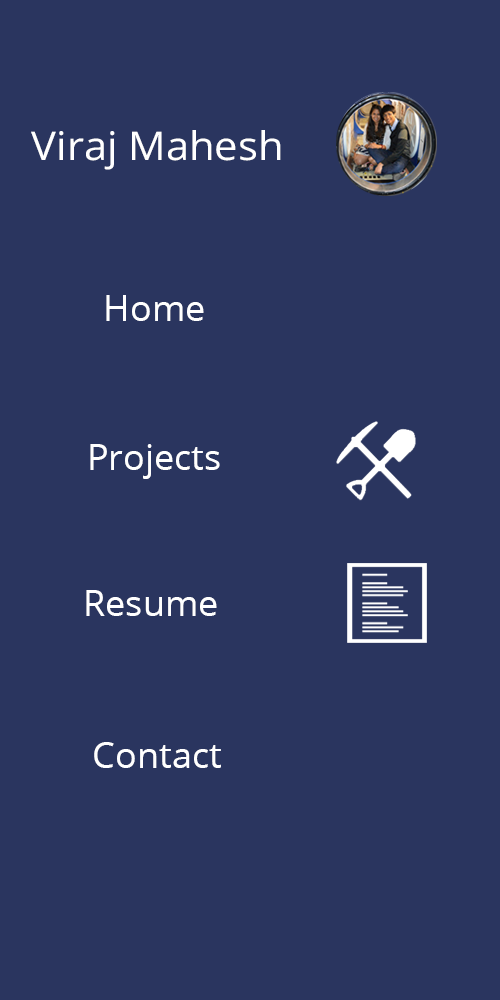
<style>
.page{position:relative;width:500px;height:1000px;background:#2a355f}
.page>*{position:absolute;margin:0}
.t1{font:39.4px "OpenSans";color:#ffffff;scale:1.06 1}
.t2{font:36px "OpenSans";color:#ffffff}
</style>
<div class="page">
<p class="t1" style="left:31px;top:130px;width:250px;height:40px">Viraj Mahesh</p>
<p class="t2" style="left:106px;top:295px;width:98px;height:26px">Home</p>
<p class="t2" style="left:90px;top:444px;width:130px;height:35px">Projects</p>
<p class="t2" style="left:86px;top:590px;width:131px;height:26px">Resume</p>
<p class="t2" style="left:94px;top:742px;width:127px;height:26px">Contact</p>
</div>
